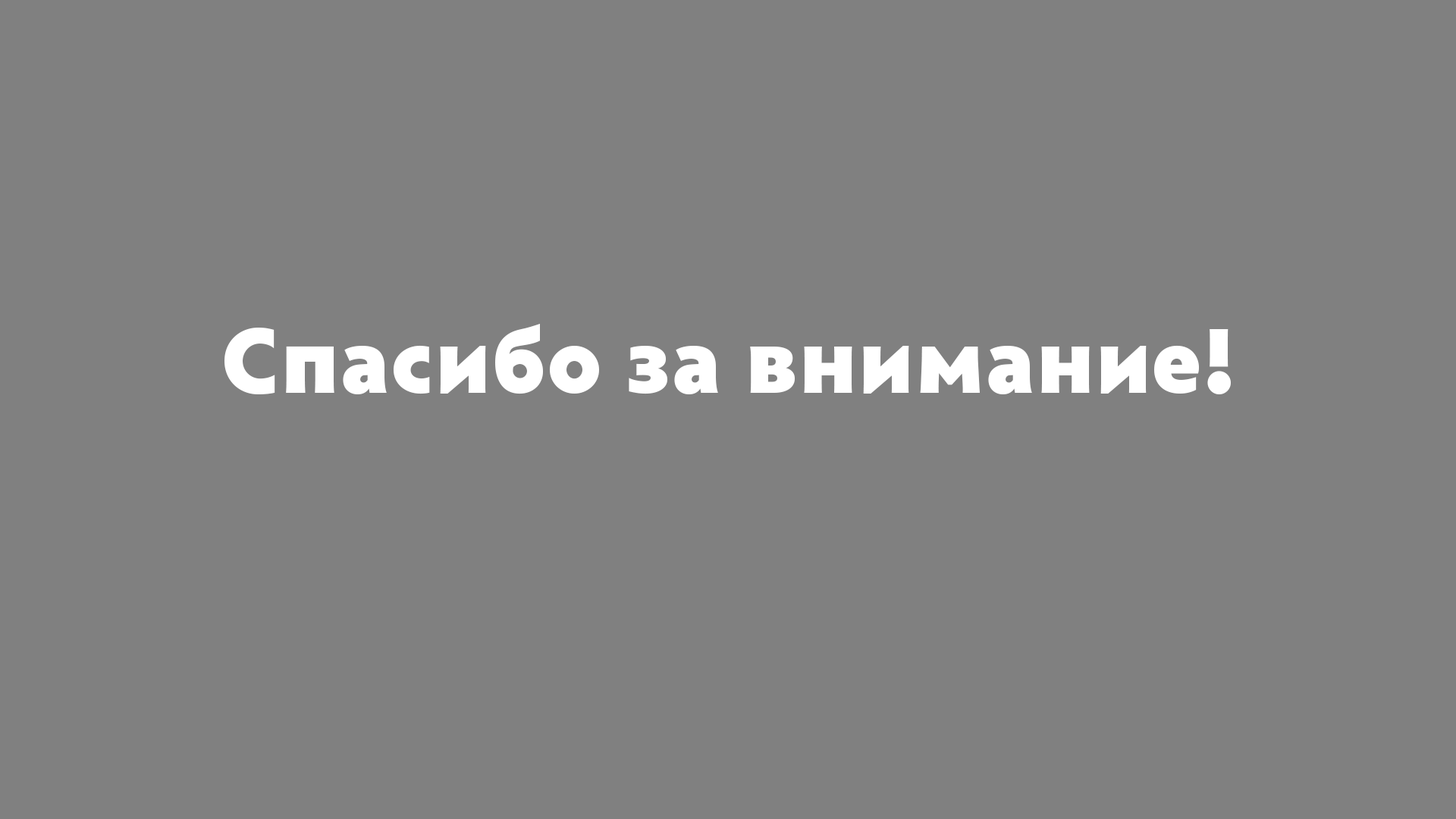
<style>
.page{position:relative;width:1456px;height:819px;background:#808080}
.page>*{position:absolute;margin:0}
.t1{font:94.8px "Radiance-Black";color:#ffffff}
</style>
<div class="page">
<p class="t1" style="left:224px;top:324px;width:1007px;height:70px">Спасибо за внимание!</p>
</div>
